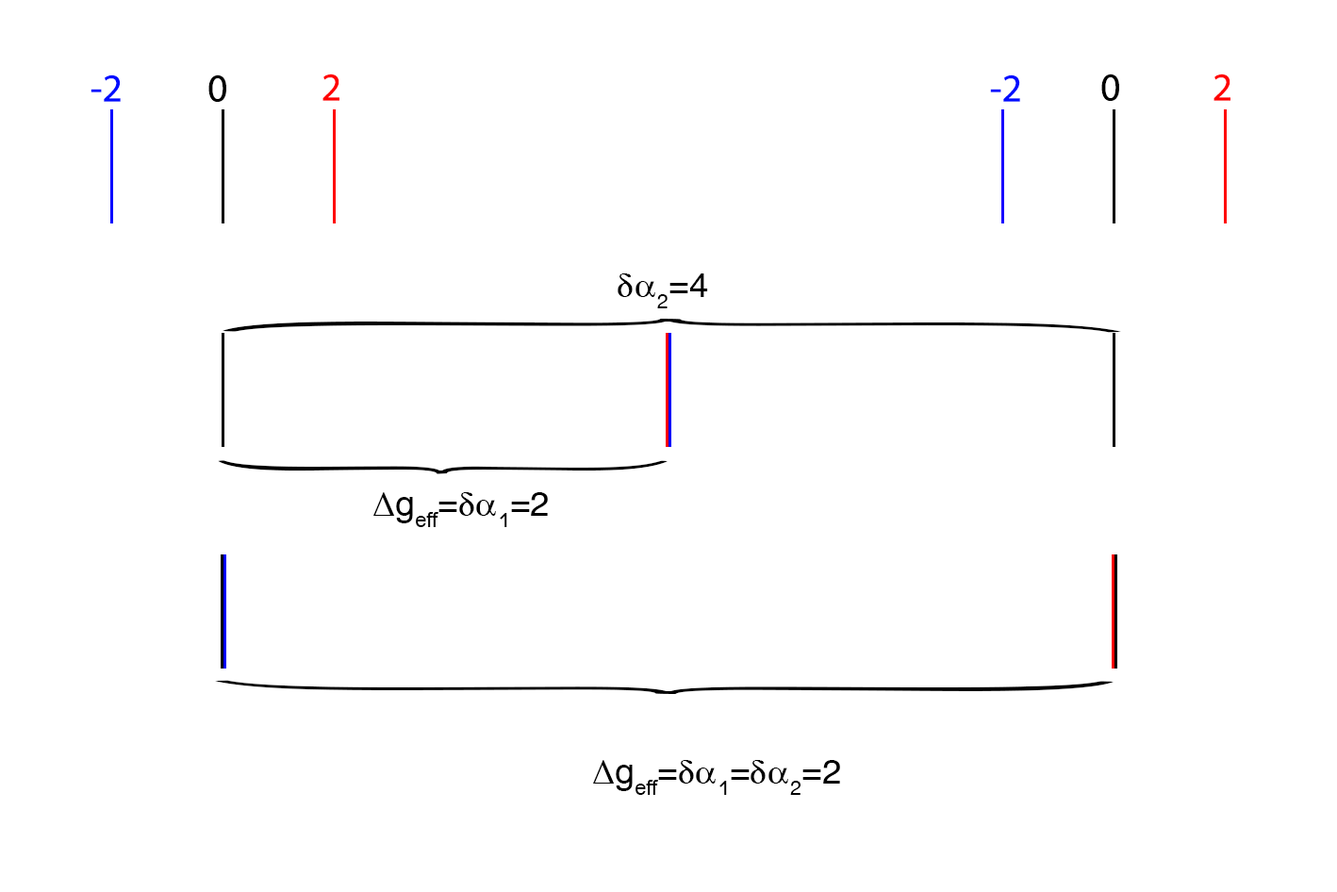
<style>
.page{position:relative;width:1337px;height:892px;background:#ffffff}
.page>*{position:absolute;margin:0}
.t1{font:39.3px "MyriadPro-Regular";color:#000cff}
.t2{font:39.3px "MyriadPro-Regular";color:#000000}
.t3{font:39.3px "MyriadPro-Regular";color:#ff0000}
.t4{font:35.4px "Vektor";color:#000000}
.t5{font:1068.5px "NuevaStd-Cond";color:#000000;scale:0.06 1}
.t6{font:534.3px "NuevaStd-Cond";color:#000000;scale:0.12 1}
.t7{font:35.4px "ArialMT";color:#000000}
</style>
<div class="page">
<p class="t1" style="left:91px;top:74px;width:30px;height:28px">-2</p>
<p class="t2" style="left:208px;top:74px;width:18px;height:28px">0</p>
<p class="t3" style="left:322px;top:74px;width:17px;height:27px">2</p>
<p class="t1" style="left:990px;top:74px;width:30px;height:28px">-2</p>
<p class="t2" style="left:1101px;top:74px;width:18px;height:27px">0</p>
<p class="t3" style="left:1213px;top:74px;width:17px;height:27px">2</p>
<p class="t4" style="left:618px;top:273px;width:90px;height:35px">da2=4</p>
<p class="t5" style="left:223px;top:319px;width:898px;height:14px;rotate:-90deg">}</p>
<p class="t6" style="left:218px;top:460px;width:450px;height:14px;rotate:-90deg">{</p>
<p class="t4" style="left:373px;top:492px;width:175px;height:35px">D<span class="t7">geff</span>=da1=2</p>
<p class="t5" style="left:215px;top:680px;width:898px;height:14px;rotate:90deg">}</p>
<p class="t4" style="left:593px;top:760px;width:247px;height:35px">D<span class="t7">geff</span>=da1=da2=2</p>
</div>
